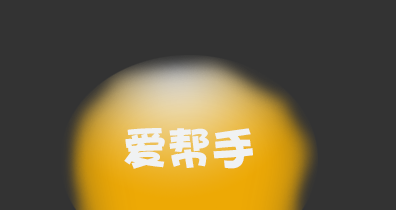
<style>
.page{position:relative;width:396px;height:210px;background:#333333}
.page>*{position:absolute;margin:0}
.t1{font:44px "DFHaiBaoW12";color:#f0f2f3}
</style>
<div class="page">
<p class="t1" style="left:124px;top:128px;width:129px;height:41px">爱帮手</p>
</div>
